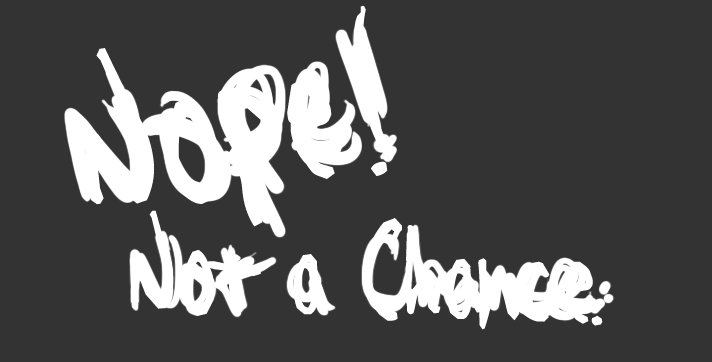
<style>
.page{position:relative;width:712px;height:362px;background:#333333}
.page>*{position:absolute;margin:0}
.t1{font:239.3px "ArmedLemon";letter-spacing:-0.24em;color:#ffffff}
.t2{font:147.5px "ArmedLemon";letter-spacing:-0.24em;color:#ffffff}
</style>
<div class="page">
<p class="t1" style="left:84px;top:5px;width:304px;height:222px;rotate:-8deg">Nope!</p>
<p class="t2" style="left:130px;top:210px;width:473px;height:120px;rotate:2deg">Not a Chance.</p>
</div>
